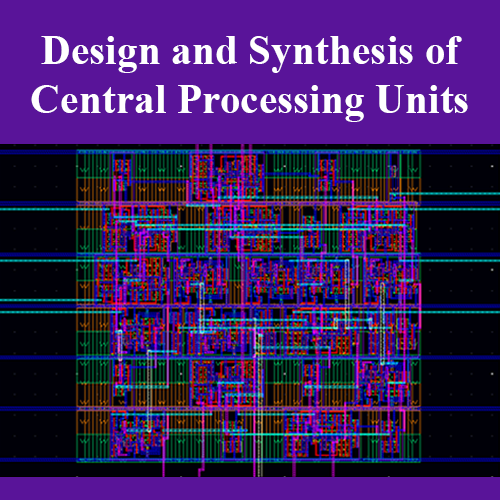
<style>
.page{position:relative;width:500px;height:500px;background:#591499}
.page>*{position:absolute;margin:0}
.t1{font:41.5px "TimesNewRomanPS-BoldMT";color:#ffffff}
</style>
<div class="page">
<p class="t1" style="left:31px;top:36px;width:437px;height:86px;text-align:center">Design and Synthesis of<br>Central Processing Units</p>
</div>
